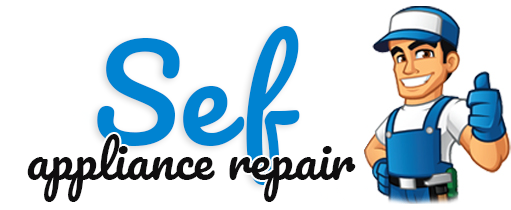
<style>
.page{position:relative;width:511px;height:210px;background:#ffffff}
.page>*{position:absolute;margin:0}
.t1{font:125px "Pacifico-Regular";letter-spacing:0.1em;color:#0083d1}
.t2{font:125px "Pacifico-Regular";color:#0083d1}
.t3{font:50px "Pacifico-Regular";color:#0f0e0f}
</style>
<div class="page">
<p class="t1" style="left:97px;top:26px;width:203px;height:159px"><span class="t2">S</span>ef</p>
<p class="t3" style="left:27px;top:134px;width:329px;height:68px">appliance repair</p>
</div>
